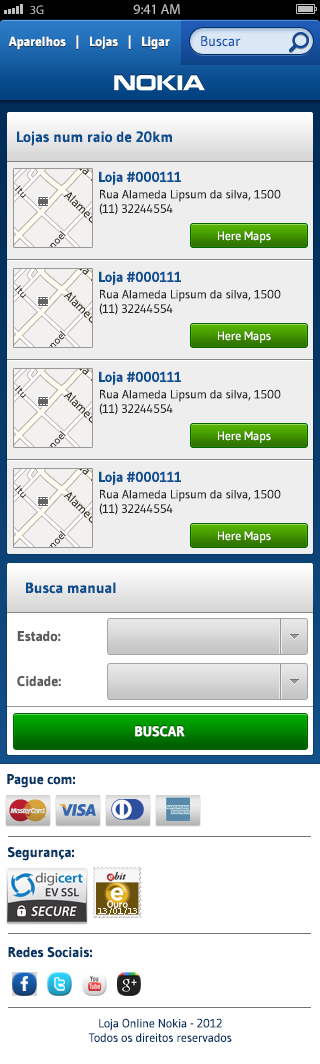
<style>
.page{position:relative;width:320px;height:1064px;background:#ffffff}
.page>*{position:absolute;margin:0}
.t1{font:12.3px "MyriadPro-Regular";color:#bfbfbf}
.t2{font:14px "MyriadPro-Regular";color:#bfbfbf}
.t3{font:13px "Gudea-Bold";color:#ffffff}
.t4{font:14px "Gudea";color:#1e58b1}
.t5{font:15px "Gudea-Bold";color:#0b4f91}
.t6{font:14px "Gudea-Bold";color:#0c5093}
.t7{font:12px "Gudea";color:#262626}
.t8{font:12px "Gudea";color:#ffffff}
.t9{font:14px "Gudea-Bold";color:#5b5b5b}
.t10{font:14px "Gudea-Bold";color:#ffffff;text-transform:uppercase}
.t11{font:14px "Gudea-Bold";color:#063665}
.t12{font:12px "Gudea";color:#063665}
</style>
<div class="page">
<p class="t1" style="left:30px;top:5px;width:14px;height:9px">3G</p>
<p class="t2" style="left:133px;top:4px;width:47px;height:10px">9:41 AM</p>
<p class="t3" style="left:8px;top:35px;width:162px;height:15px">Aparelhos   |   Lojas   |   Ligar</p>
<p class="t4" style="left:201px;top:36px;width:40px;height:11px">Buscar</p>
<p class="t5" style="left:17px;top:131px;width:155px;height:15px">Lojas num raio de 20km</p>
<p class="t6" style="left:99px;top:171px;width:82px;height:15px">Loja #000111</p>
<p class="t7" style="left:99px;top:189px;width:182px;height:26px">Rua Alameda Lipsum da silva, 1500<br>(11) 32244554</p>
<p class="t8" style="left:218px;top:231px;width:53px;height:12px">Here Maps</p>
<p class="t6" style="left:99px;top:271px;width:82px;height:15px">Loja #000111</p>
<p class="t7" style="left:99px;top:289px;width:182px;height:26px">Rua Alameda Lipsum da silva, 1500<br>(11) 32244554</p>
<p class="t8" style="left:218px;top:331px;width:53px;height:12px">Here Maps</p>
<p class="t6" style="left:99px;top:371px;width:82px;height:15px">Loja #000111</p>
<p class="t7" style="left:99px;top:389px;width:182px;height:26px">Rua Alameda Lipsum da silva, 1500<br>(11) 32244554</p>
<p class="t8" style="left:218px;top:431px;width:53px;height:12px">Here Maps</p>
<p class="t6" style="left:99px;top:471px;width:82px;height:15px">Loja #000111</p>
<p class="t7" style="left:99px;top:489px;width:182px;height:26px">Rua Alameda Lipsum da silva, 1500<br>(11) 32244554</p>
<p class="t8" style="left:218px;top:531px;width:53px;height:12px">Here Maps</p>
<p class="t5" style="left:26px;top:582px;width:90px;height:12px">Busca manual</p>
<p class="t9" style="left:17px;top:631px;width:44px;height:11px">Estado:</p>
<p class="t9" style="left:17px;top:676px;width:44px;height:11px">Cidade:</p>
<p class="t10" style="left:135px;top:726px;width:50px;height:11px">Buscar</p>
<p class="t11" style="left:7px;top:774px;width:68px;height:14px">Pague com:</p>
<p class="t11" style="left:7px;top:847px;width:67px;height:14px">Segurança:</p>
<p class="t11" style="left:8px;top:947px;width:84px;height:11px">Redes Sociais:</p>
<p class="t12" style="left:88px;top:1018px;width:144px;height:24px;text-align:center">Loja Online Nokia - 2012<br>Todos os direitos reservados</p>
</div>
